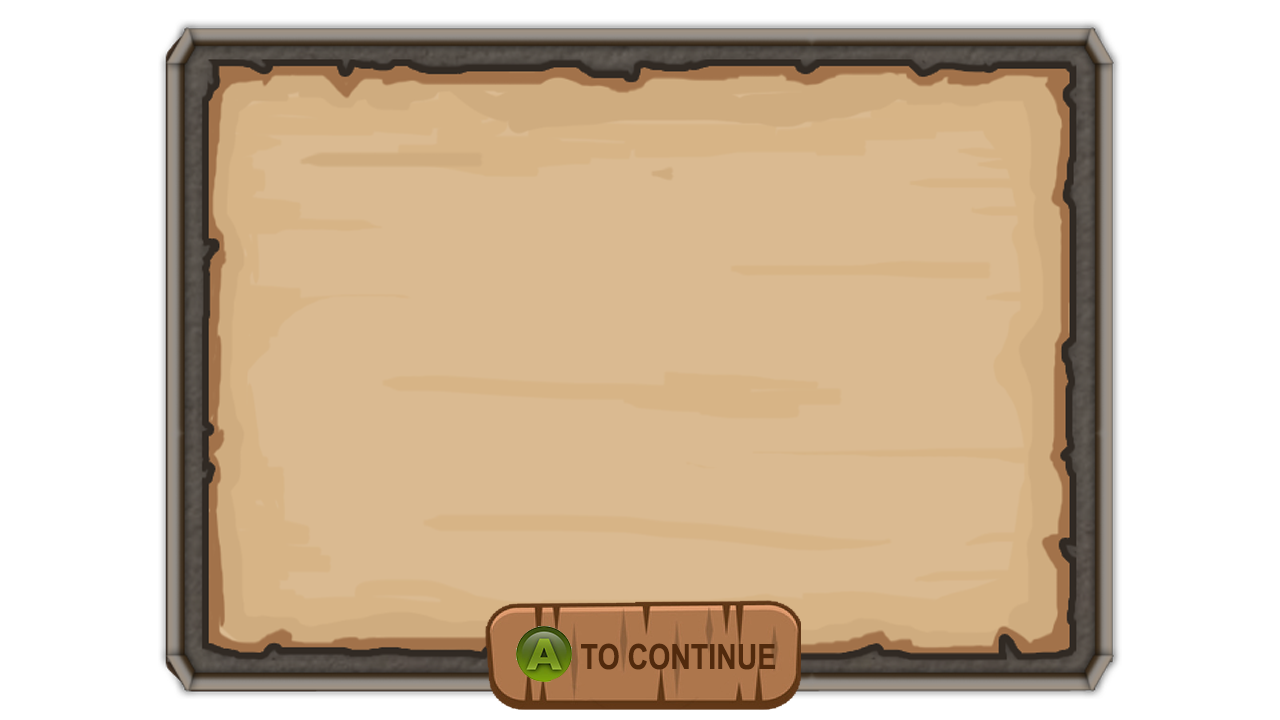
<style>
.page{position:relative;width:1280px;height:720px;background:#daba91}
.page>*{position:absolute;margin:0}
.t1{font:34.7px "ArialNarrow-Bold";color:#512a0d}
.t2{font:41.7px "ArialNarrow-Bold";color:#512a0d}
</style>
<div class="page">
<p class="t1" style="left:581px;top:643px;width:194px;height:27px"><span class="t2">  </span>     TO CONTINUE</p>
</div>
